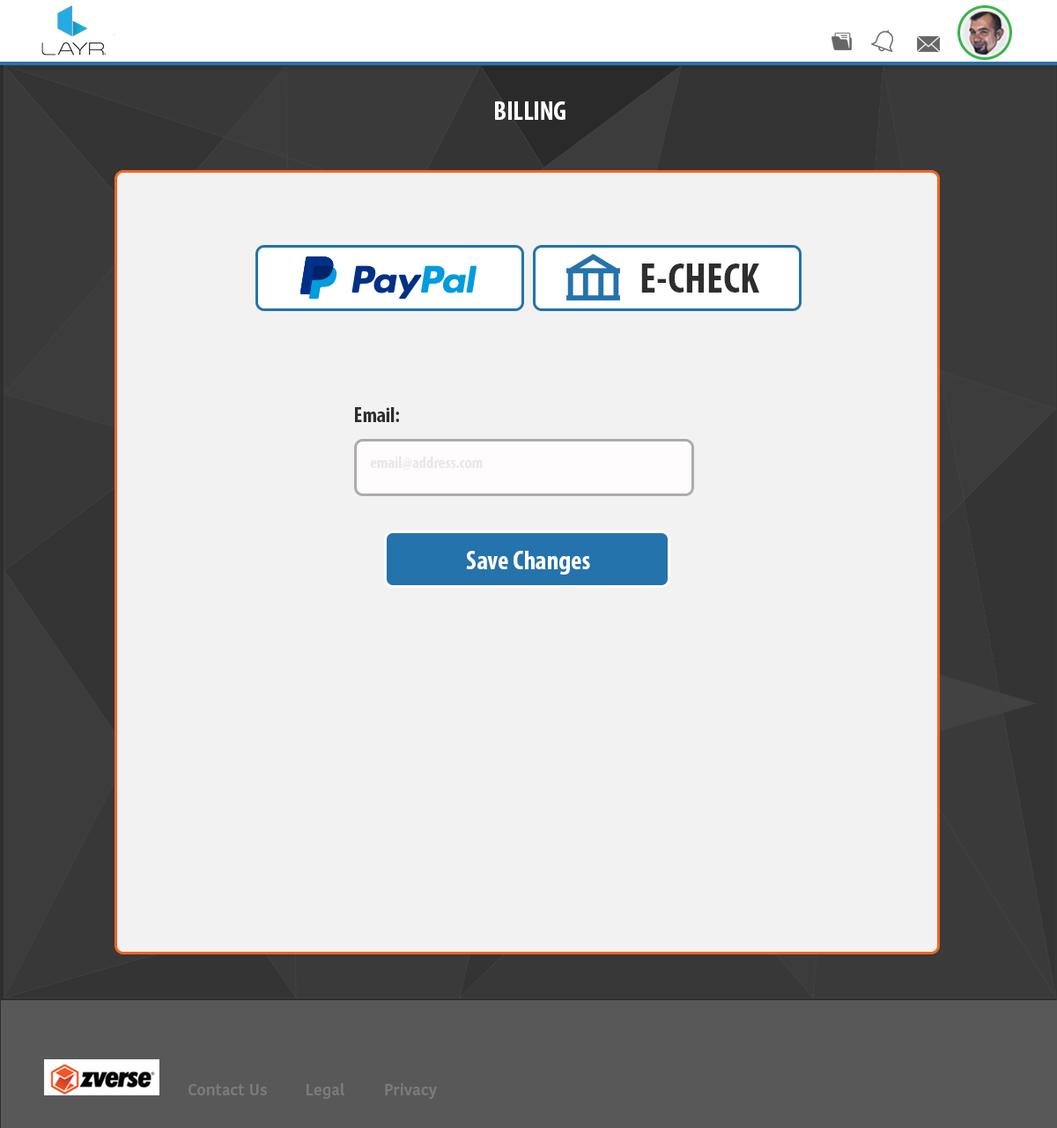
<style>
.page{position:relative;width:1057px;height:1128px;background:#f3f2f2}
.page>*{position:absolute;margin:0}
.t1{font:26.4px "MyriadPro-BoldCond";color:#fffefe}
.t2{font:42.3px "MyriadPro-BoldCond";color:#2e2e2e}
.t3{font:21.1px "MyriadPro-BoldCond";color:#2e2e2e}
.t4{font:15.9px "KohinoorDevanagari-Medium";color:#7a7b7c}
</style>
<div class="page">
<p class="t1" style="left:495px;top:101px;width:71px;height:19px">BILLING</p>
<p class="t2" style="left:641px;top:263px;width:119px;height:30px">E-CHECK</p>
<p class="t3" style="left:355px;top:407px;width:44px;height:15px">Email:</p>
<p class="t1" style="left:466px;top:551px;width:124px;height:23px">Save Changes</p>
<p class="t4" style="left:189px;top:1083px;width:248px;height:16px">Contact Us  Legal   Privacy Policy</p>
</div>
